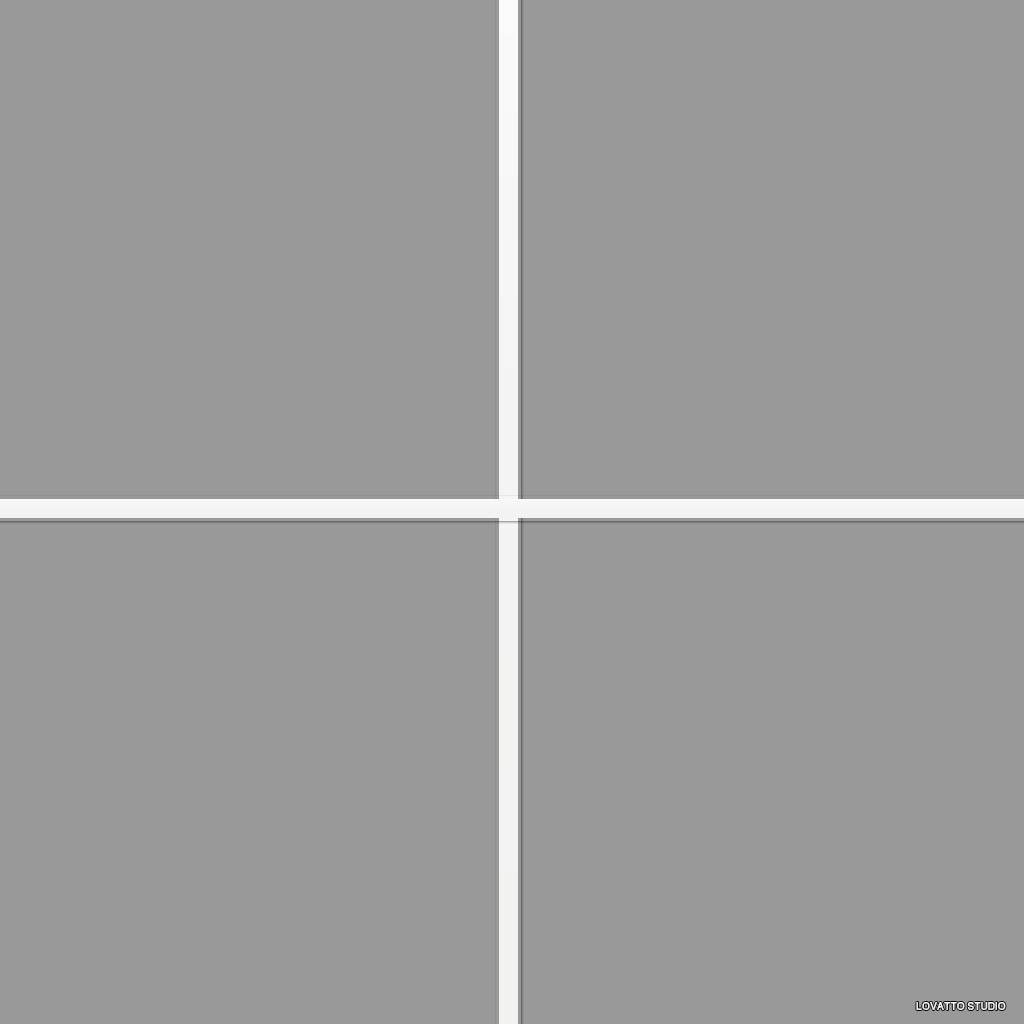
<style>
.page{position:relative;width:1024px;height:1024px;background:#999999}
.page>*{position:absolute;margin:0}
.t1{font:10px "Track";color:#ffffff}
</style>
<div class="page">
<p class="t1" style="left:916px;top:1002px;width:90px;height:8px">LOVATTO STUDIO</p>
</div>
